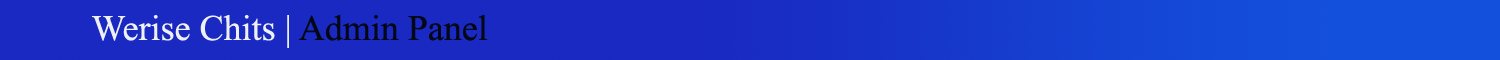
<style>
.page{position:relative;width:1500px;height:60px;background:#1929c1}
.page>*{position:absolute;margin:0}
.t1{font:36px "TimesNewRomanPSMT";color:#eef0f4}
.t2{font:36px "TimesNewRomanPSMT";color:#010715}
</style>
<div class="page">
<p class="t1" style="left:92px;top:15px;width:396px;height:33px">Werise Chits | <span class="t2">Admin Panel</span></p>
</div>
